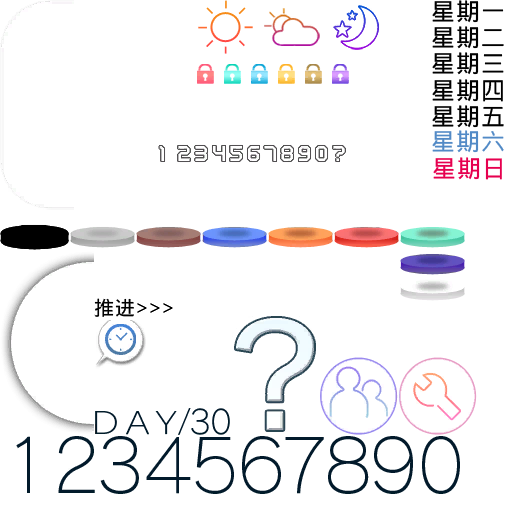
<style>
.page{position:relative;width:512px;height:512px;background:#ffffff}
.page>*{position:absolute;margin:0}
.t1{font:24px/26.3px "WenQuanYiMicroHeiMono";letter-spacing:0.05em;color:#000000}
.t2{font:24px "WenQuanYiMicroHeiMono";letter-spacing:0.05em;color:#528ac6}
.t3{font:24px "WenQuanYiMicroHeiMono";letter-spacing:0.05em;color:#e6004f}
.t4{font:20px "WenQuanYiMicroHeiMono";letter-spacing:0.05em;color:#000000}
</style>
<div class="page">
<p class="t1" style="left:432px;top:0px;width:72px;height:128px">星期一<br>星期二<br>星期三<br>星期四<br>星期五</p>
<p class="t2" style="left:432px;top:130px;width:72px;height:23px">星期六</p>
<p class="t3" style="left:433px;top:157px;width:69px;height:23px">星期日</p>
<p class="t4" style="left:94px;top:298px;width:79px;height:19px">推进&gt;&gt;&gt;</p>
</div>
